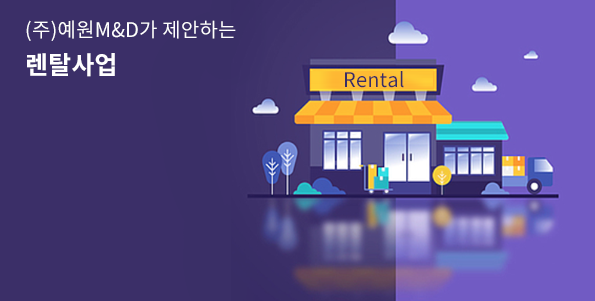
<style>
.page{position:relative;width:595px;height:301px;background:#3b2f68}
.page>*{position:absolute;margin:0}
.t1{font:20px/37px "NotoSansCJKkr-Regular";letter-spacing:0.01em;color:#ffffff}
.t2{font:25px/37px "NotoSansCJKkr-Bold";letter-spacing:0.01em;color:#ffffff}
.t3{font:20px "NotoSansCJKkr-Regular";letter-spacing:0.01em;color:#392e66}
</style>
<div class="page">
<p class="t1" style="left:26px;top:20px;width:210px;height:57px">(주)예원M&amp;D가 제안하는<br><span class="t2">렌탈사업</span></p>
<p class="t3" style="left:345px;top:71px;width:59px;height:17px">Rental</p>
</div>
